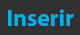
<style>
.page{position:relative;width:80px;height:35px;background:#313131}
.page>*{position:absolute;margin:0}
.t1{font:23.5px "MyriadPro-Bold";color:#00b2e8}
</style>
<div class="page">
<p class="t1" style="left:8px;top:9px;width:66px;height:17px">Inserir</p>
</div>
